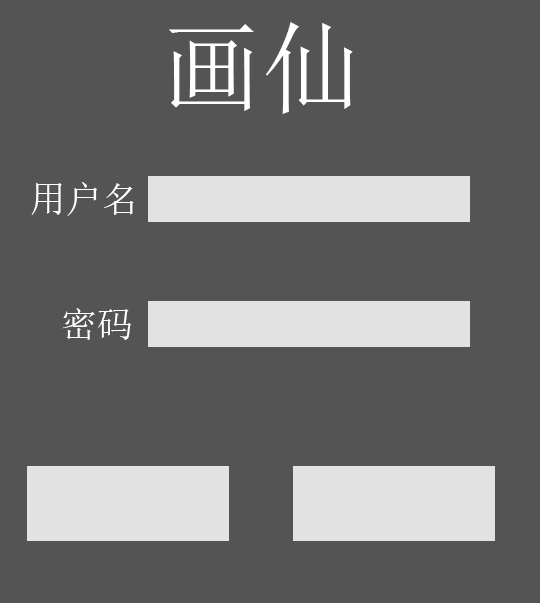
<style>
.page{position:relative;width:540px;height:603px;background:#545454}
.page>*{position:absolute;margin:0}
.t1{font:100px "SimSun";color:#ffffff}
.t2{font:36px "SimSun";color:#ffffff}
</style>
<div class="page">
<p class="t1" style="left:169px;top:22px;width:184px;height:92px">画仙</p>
<p class="t2" style="left:31px;top:182px;width:103px;height:34px">用户名</p>
<p class="t2" style="left:62px;top:308px;width:70px;height:32px">密码</p>
</div>
